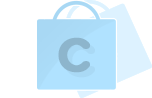
<style>
.page{position:relative;width:152px;height:98px;background:#ffffff}
.page>*{position:absolute;margin:0}
.t1{font:49px "ProximaNovaSoft-Bold";letter-spacing:-0.005em;color:#8db5cc;font-weight:bold}
</style>
<div class="page">
<p class="t1" style="left:58px;top:37px;width:32px;height:36px">C</p>
</div>
